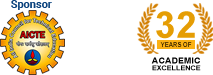
<style>
.page{position:relative;width:213px;height:75px;background:#ffffff}
.page>*{position:absolute;margin:0}
.t1{font:11px "Roboto-Bold";color:#0a427d}
.t2{font:36.4px "Arial-BoldMT";color:#e59d04;scale:1.03 1}
.t3{font:6.6px "Arial-BoldMT";scale:0.91 1}
.t4{font:6.6px/6.9px "Arial-BoldMT";color:#000000;scale:1.1 1}
.t5{font:8.2px/8.2px "Arial-BoldMT";color:#000000;scale:1.1 1}
</style>
<div class="page">
<p class="t1" style="left:11px;top:0px;width:41px;height:10px">Sponsor</p>
<p class="t2" style="left:156px;top:11px;width:39px;height:28px">32</p>
<p class="t3" style="left:160px;top:42px;width:32px;height:5px">YEARS OF</p>
<p class="t4" style="left:151px;top:57px;width:50px;height:14px;text-align:center"><span class="t5">ACADEMIC<br></span>EXCELLENCE</p>
</div>
